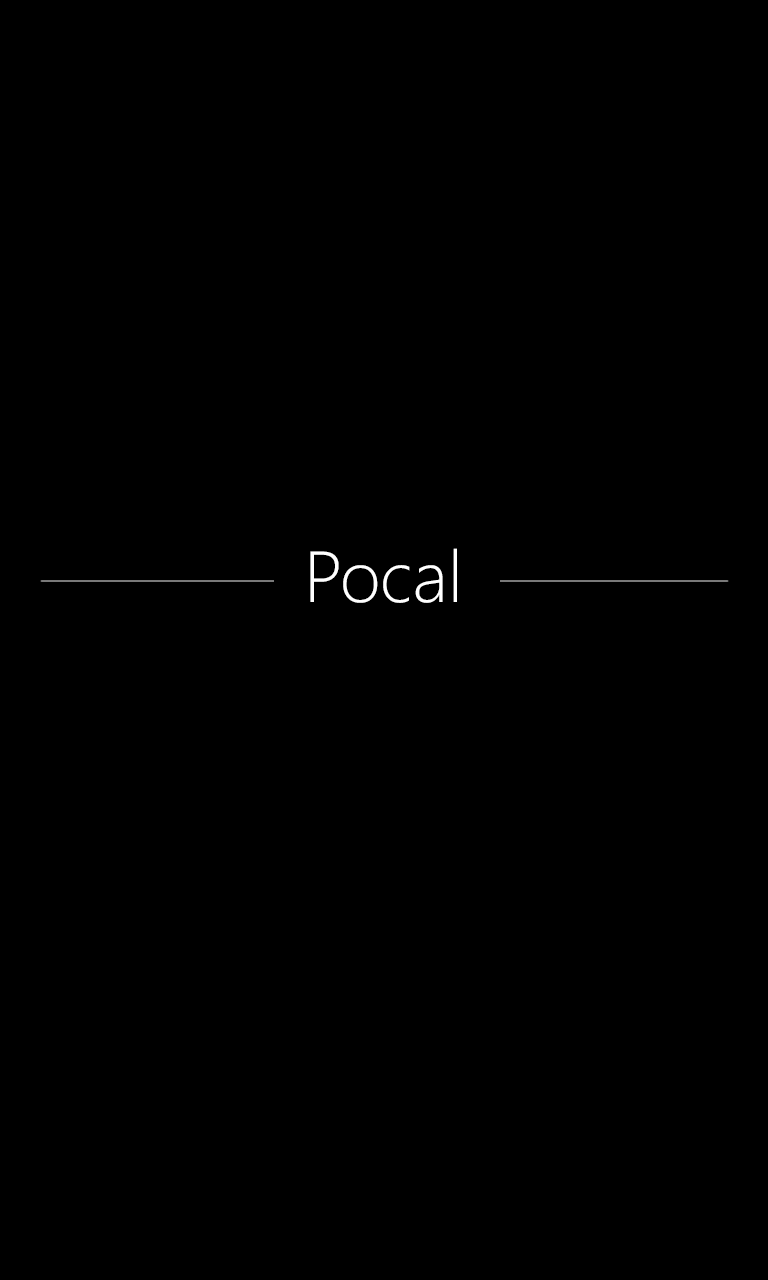
<style>
.page{position:relative;width:768px;height:1280px;background:#000000}
.page>*{position:absolute;margin:0}
.t1{font:72px "SegoeWP-Light";color:#ffffff}
</style>
<div class="page">
<p class="t1" style="left:310px;top:548px;width:147px;height:55px">Pocal</p>
</div>
